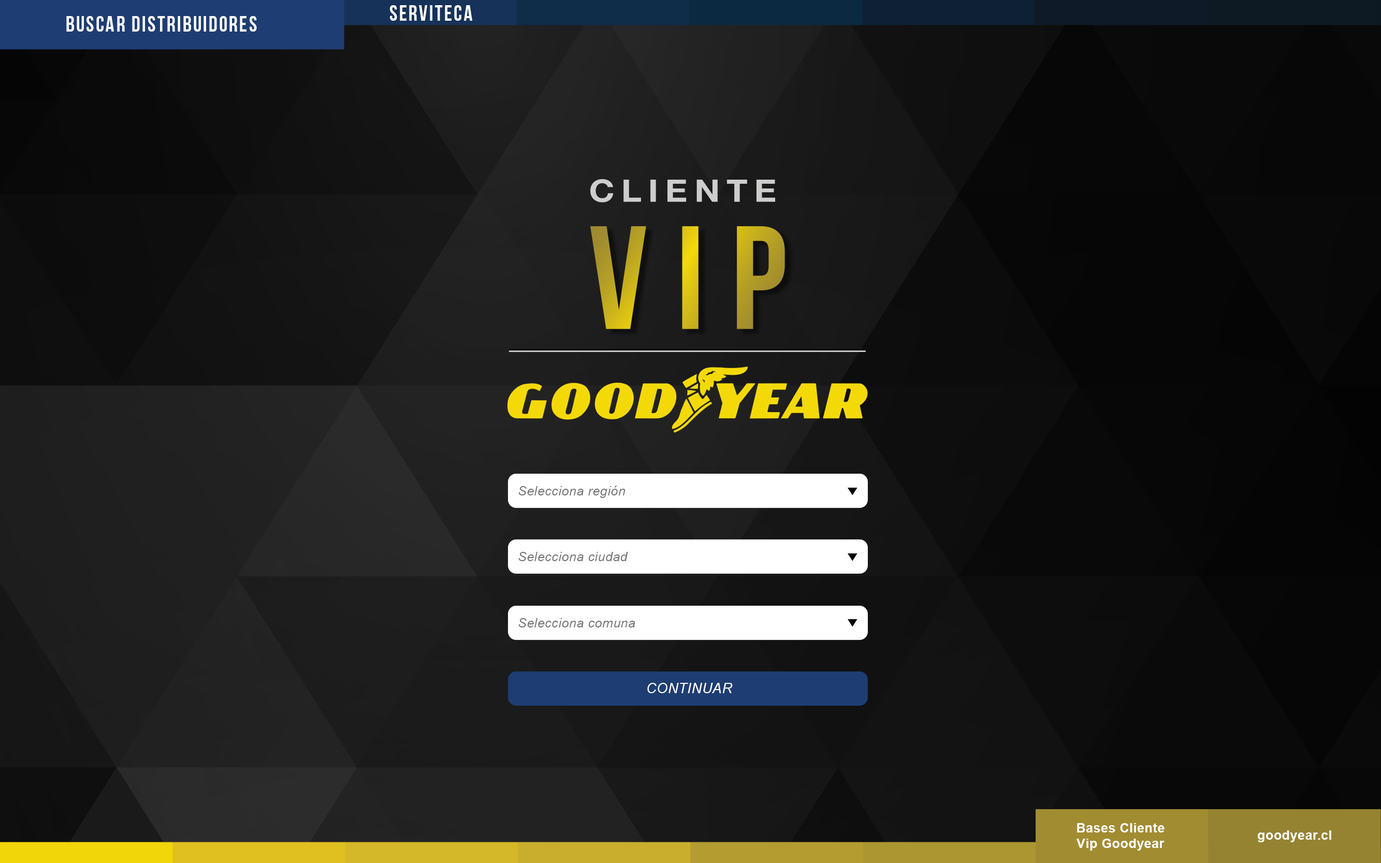
<style>
.page{position:relative;width:1381px;height:863px}
.page>*{position:absolute;margin:0}
.t1{font:21.6px "BebasNeue";letter-spacing:0.075em;color:#ffffff}
.t2{font:12.9px "Arial-ItalicMT";letter-spacing:0.025em;color:#737373}
.t3{font:14px "Arial-ItalicMT";letter-spacing:0.025em;color:#ffffff;text-transform:uppercase}
.t4{font:12.9px "Arial-BoldMT";letter-spacing:0.025em;color:#ffffff}
</style>
<div class="page">
<p class="t1" style="left:390px;top:5px;width:82px;height:16px">SERVITECA</p>
<p class="t1" style="left:66px;top:16px;width:191px;height:16px">BUSCAR DIStribuidores</p>
<p class="t2" style="left:518px;top:486px;width:108px;height:12px">Selecciona región</p>
<p class="t2" style="left:518px;top:552px;width:110px;height:9px">Selecciona ciudad</p>
<p class="t2" style="left:518px;top:618px;width:117px;height:10px">Selecciona comuna</p>
<p class="t3" style="left:647px;top:683px;width:86px;height:10px">Continuar</p>
<p class="t4" style="left:1077px;top:823px;width:88px;height:28px;text-align:center">Bases Cliente<br>Vip Goodyear</p>
<p class="t4" style="left:1258px;top:831px;width:73px;height:12px">goodyear.cl</p>
</div>
